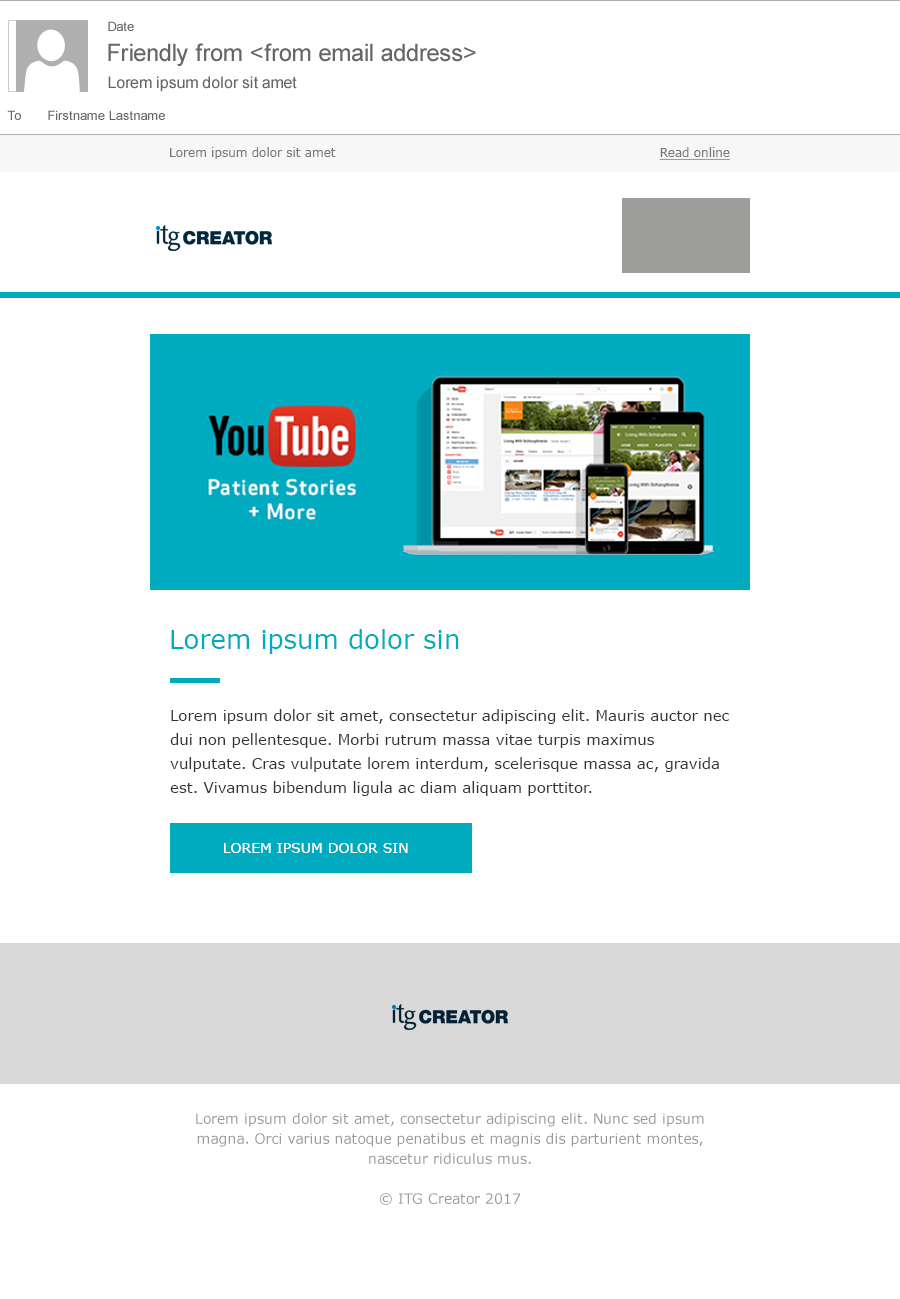
<style>
.page{position:relative;width:900px;height:1299px;background:#ffffff}
.page>*{position:absolute;margin:0}
.t1{font:12px "Verdana";color:#787878}
.t2{font:12px "Verdana";color:#787878;text-decoration:underline}
.t3{font:26px "Verdana";color:#00abc0}
.t4{font:15px/24px "Verdana";color:#333333}
.t5{font:14px "Verdana";color:#ffffff;text-transform:uppercase}
.t6{font:14px/20px "Verdana";color:#999999}
</style>
<div class="page">
<p class="t1" style="left:170px;top:147px;width:166px;height:12px">Lorem ipsum dolor sit amet</p>
<p class="t2" style="left:659px;top:147px;width:71px;height:13px">Read online</p>
<p class="t3" style="left:171px;top:629px;width:288px;height:25px">Lorem ipsum dolor sin</p>
<p class="t4" style="left:170px;top:709px;width:559px;height:87px">Lorem ipsum dolor sit amet, consectetur adipiscing elit. Mauris auctor nec dui non pellentesque. Morbi rutrum massa vitae turpis maximus vulputate. Cras vulputate lorem interdum, scelerisque massa ac, gravida est. Vivamus bibendum ligula ac diam aliquam porttitor.</p>
<p class="t5" style="left:224px;top:843px;width:184px;height:10px">LOREM IPSUM DOLOR SIN</p>
<p class="t6" style="left:196px;top:1113px;width:508px;height:92px;text-align:center">Lorem ipsum dolor sit amet, consectetur adipiscing elit. Nunc sed ipsum magna. Orci varius natoque penatibus et magnis dis parturient montes, nascetur ridiculus mus.<br>© ITG Creator 2017</p>
</div>
